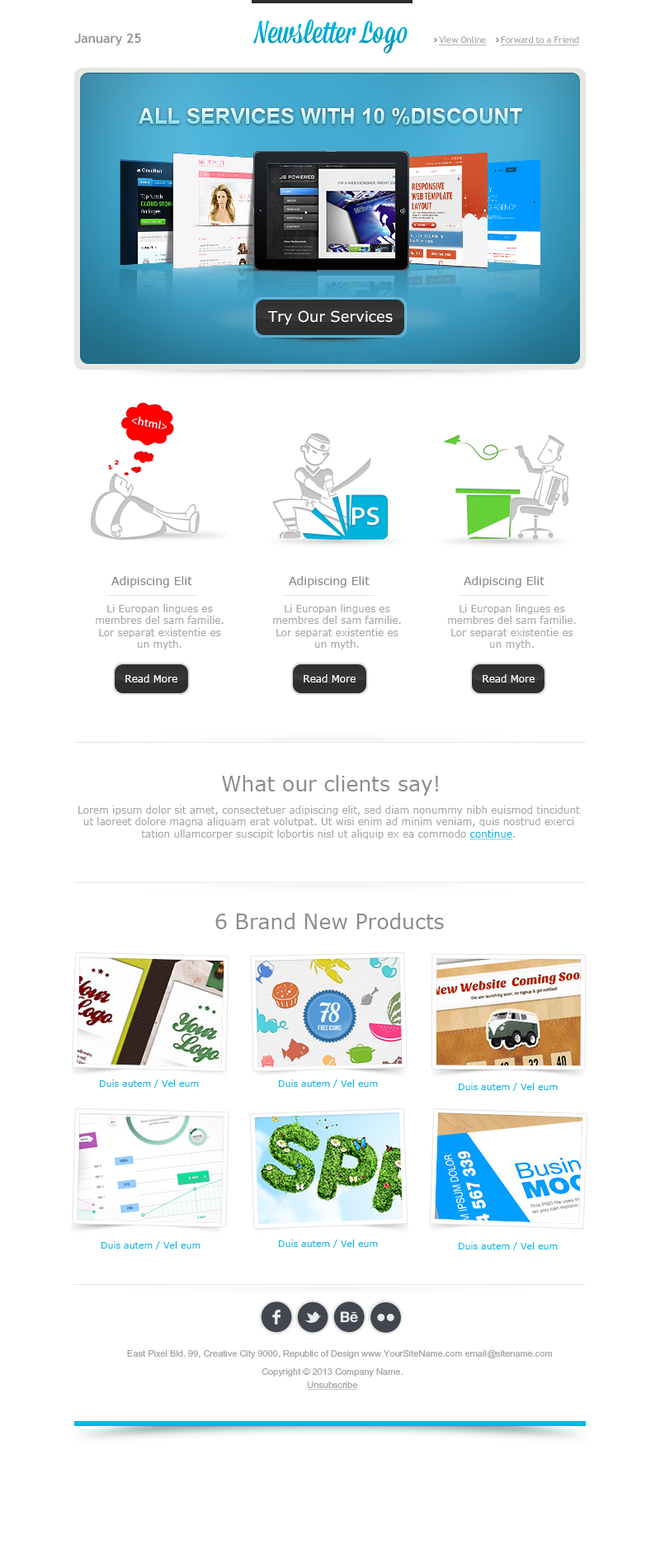
<style>
.page{position:relative;width:660px;height:1568px;background:#ffffff}
.page>*{position:absolute;margin:0}
.t1{font:13.2px "TrebuchetMS-Bold";letter-spacing:-0.015em;color:#969595}
.t2{font:9.1px "TrebuchetMS";letter-spacing:-0.015em;color:#969595;text-decoration:underline}
.t3{font:21.5px "Arial-BoldMT";text-transform:uppercase}
.t4{font:14.9px "Verdana";color:#ffffff}
.t5{font:11.6px "Verdana";color:#8c8c8c}
.t6{font:9.9px "Verdana";color:#a7a7a7}
.t7{font:9.9px "Verdana";color:#ffffff}
.t8{font:20.6px "Verdana";color:#8c8c8c}
.t9{font:9.9px "Verdana";color:#00b8e4;text-decoration:underline}
.t10{font:9.1px "Verdana";color:#00b8e4}
.t11{font:9.1px "ArialMT";color:#a7a7a7}
.t12{font:9.1px/13.2px "ArialMT";color:#a7a7a7}
.t13{font:9.1px/13.2px "ArialMT";color:#a7a7a7;text-decoration:underline}
</style>
<div class="page">
<p class="t1" style="left:74px;top:33px;width:67px;height:13px">January 25</p>
<p class="t2" style="left:439px;top:36px;width:48px;height:9px">View Online</p>
<p class="t2" style="left:501px;top:36px;width:78px;height:9px">Forward to a Friend</p>
<p class="t3" style="left:139px;top:108px;width:383px;height:17px">All SERVICES with 10 %discount</p>
<p class="t4" style="left:268px;top:310px;width:125px;height:15px">Try Our Services</p>
<p class="t5" style="left:111px;top:576px;width:81px;height:12px">Adipiscing Elit</p>
<p class="t5" style="left:289px;top:576px;width:81px;height:12px">Adipiscing Elit</p>
<p class="t5" style="left:464px;top:576px;width:81px;height:12px">Adipiscing Elit</p>
<p class="t6" style="left:96px;top:604px;width:128px;height:45px;text-align:center">Li Europan lingues es membres del sam familie. Lor separat existentie es un myth.</p>
<p class="t6" style="left:273px;top:604px;width:128px;height:45px;text-align:center">Li Europan lingues es membres del sam familie. Lor separat existentie es un myth.</p>
<p class="t6" style="left:448px;top:604px;width:128px;height:45px;text-align:center">Li Europan lingues es membres del sam familie. Lor separat existentie es un myth.</p>
<p class="t7" style="left:125px;top:674px;width:52px;height:8px">Read More</p>
<p class="t7" style="left:304px;top:674px;width:52px;height:8px">Read More</p>
<p class="t7" style="left:483px;top:674px;width:52px;height:8px">Read More</p>
<p class="t8" style="left:222px;top:775px;width:216px;height:21px">What our clients say!</p>
<p class="t6" style="left:78px;top:805px;width:502px;height:35px;text-align:center">Lorem ipsum dolor sit amet, consectetuer adipiscing elit, sed diam nonummy nibh euismod tincidunt ut laoreet dolore magna aliquam erat volutpat. Ut wisi enim ad minim veniam, quis nostrud exerci tation ullamcorper suscipit lobortis nisl ut aliquip ex ea commodo <span class="t9">continue</span>.</p>
<p class="t8" style="left:215px;top:913px;width:229px;height:16px">6 Brand New Products</p>
<p class="t10" style="left:100px;top:1079px;width:99px;height:9px">Duis autem / Vel eum</p>
<p class="t10" style="left:279px;top:1079px;width:99px;height:9px">Duis autem / Vel eum</p>
<p class="t10" style="left:459px;top:1083px;width:99px;height:8px">Duis autem / Vel eum</p>
<p class="t10" style="left:102px;top:1241px;width:99px;height:8px">Duis autem / Vel eum</p>
<p class="t10" style="left:279px;top:1240px;width:99px;height:8px">Duis autem / Vel eum</p>
<p class="t10" style="left:459px;top:1242px;width:99px;height:8px">Duis autem / Vel eum</p>
<p class="t11" style="left:127px;top:1350px;width:425px;height:8px">East Pixel Bld. 99, Creative City 9000, Republic of Design www.YourSiteName.com email@sitename.com</p>
<p class="t12" style="left:262px;top:1368px;width:141px;height:22px;text-align:center">Copyright © 2013 Company Name.<br><span class="t13">Unsubscribe</span></p>
</div>
